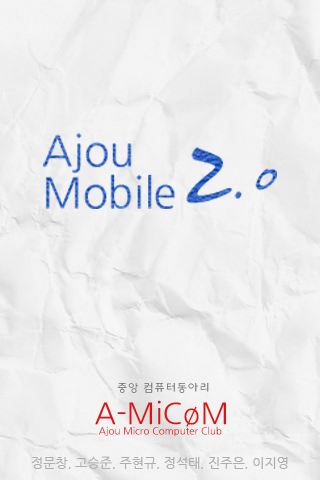
<style>
.page{position:relative;width:320px;height:480px}
.page>*{position:absolute;margin:0}
.t1{font:11.2px "HYkanM";color:#6a6a6a}
.t2{font:29.6px "NanumGothic";color:#dd1313}
.t3{font:9.9px "NanumGothic"}
.t4{font:13px "NanumGothic";color:#aeaeae}
</style>
<div class="page">
<p class="t1" style="left:117px;top:382px;width:92px;height:11px">중앙 컴퓨터동아리</p>
<p class="t2" style="left:95px;top:400px;width:131px;height:27px">A-MiCøM</p>
<p class="t3" style="left:99px;top:426px;width:123px;height:10px">Ajou Micro Computer Club</p>
<p class="t4" style="left:31px;top:456px;width:257px;height:13px">정문창, 고승준, 주현규, 정석태, 진주은, 이지영</p>
</div>
